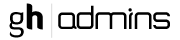
<style>
.page{position:relative;width:180px;height:40px;background:#ffffff}
.page>*{position:absolute;margin:0}
.t1{font:33.3px "DiavloBook-Regular";color:#000000}
.t2{font:33.3px "DiavloBlack-Regular";color:#000000}
.t3{font:33.3px "SquareTypeB";color:#000000}
</style>
<div class="page">
<p class="t1" style="left:9px;top:3px;width:34px;height:35px">g<span class="t2">h</span></p>
<p class="t3" style="left:58px;top:5px;width:112px;height:24px">admins</p>
</div>
